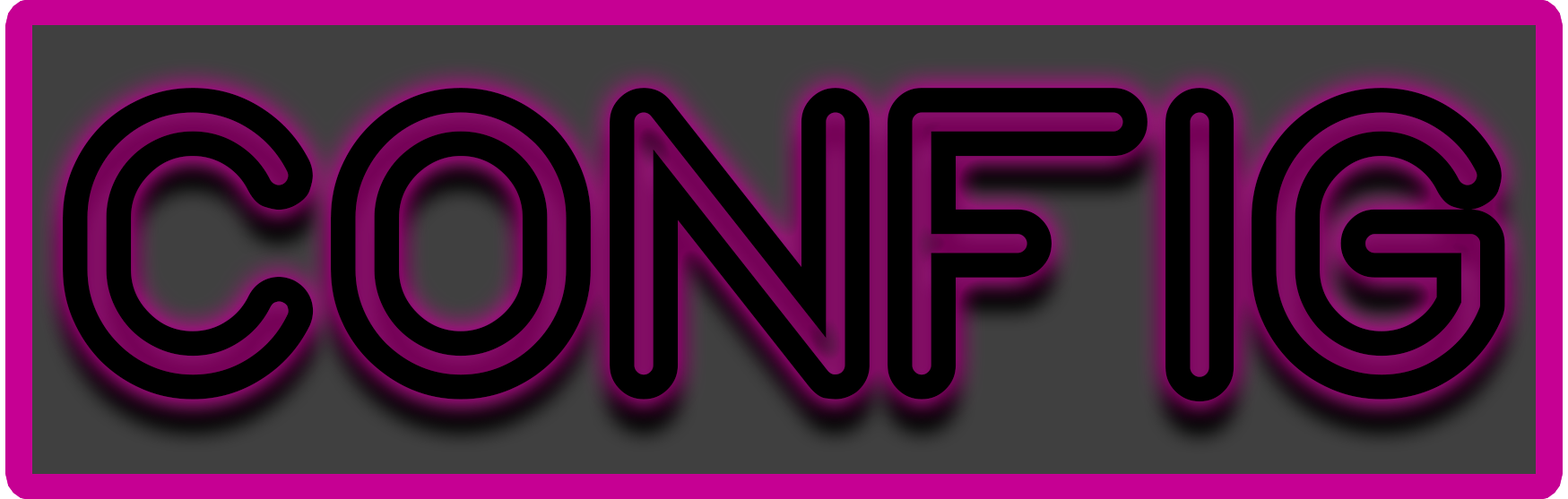
<style>
.page{position:relative;width:1568px;height:499px;background:#404040}
.page>*{position:absolute;margin:0}
.t1{font:412.8px "NEONGLOW-Bold";color:#000000}
</style>
<div class="page">
<p class="t1" style="left:63px;top:88px;width:1442px;height:315px">CONFIG</p>
</div>
